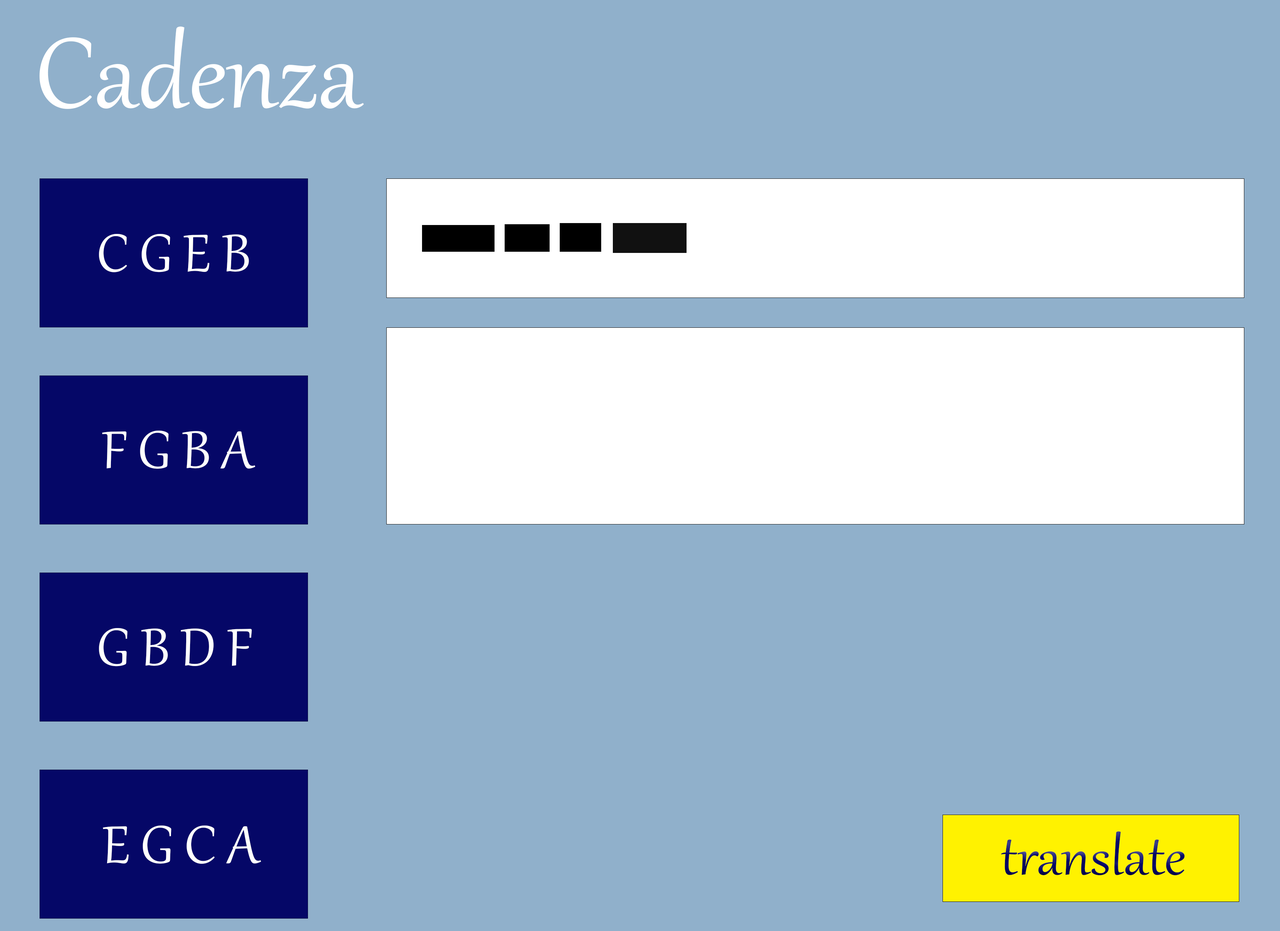
<style>
.page{position:relative;width:1280px;height:931px;background:#90b0cb}
.page>*{position:absolute;margin:0}
.t1{font:121.3px "Gabriola";color:#ffffff}
.t2{font:64.7px "Gabriola";color:#ffffff}
.t3{font:64.7px "Gabriola";color:#050766;scale:1.06 1}
</style>
<div class="page">
<p class="t1" style="left:39px;top:26px;width:325px;height:83px">Cadenza</p>
<p class="t2" style="left:99px;top:234px;width:150px;height:38px">C G E B</p>
<p class="t2" style="left:102px;top:431px;width:153px;height:38px">F G B A</p>
<p class="t2" style="left:99px;top:628px;width:153px;height:39px">G B D F</p>
<p class="t2" style="left:103px;top:826px;width:158px;height:38px">E G C A</p>
<p class="t3" style="left:1001px;top:832px;width:184px;height:44px">translate</p>
</div>
